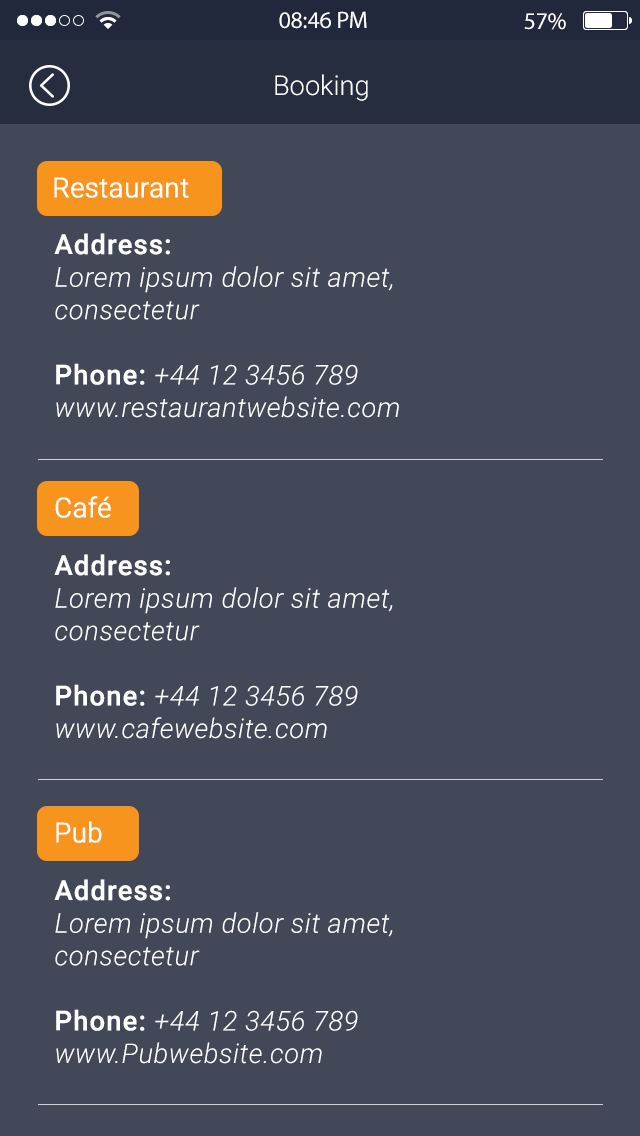
<style>
.page{position:relative;width:640px;height:1136px;background:#424858}
.page>*{position:absolute;margin:0}
.t1{font:24px "MyriadPro-Regular";color:#fefeff}
.t2{font:24px "MyriadPro-Regular";color:#ffffff}
.t3{font:27.2px "Roboto-Light";color:#ffffff}
.t4{font:27.2px "Roboto-Light";color:#ffffff;font-weight:bold}
.t5{font:27.2px "Roboto-LightItalic";letter-spacing:0.02em;color:#ffffff}
.t6{font:27.2px "Roboto-Medium";letter-spacing:0.02em;color:#ffffff;font-weight:bold}
</style>
<div class="page">
<p class="t1" style="left:279px;top:11px;width:88px;height:18px">08:46 PM</p>
<p class="t2" style="left:524px;top:13px;width:42px;height:17px">57%</p>
<p class="t3" style="left:275px;top:74px;width:93px;height:27px">Booking</p>
<p class="t4" style="left:54px;top:177px;width:135px;height:21px">Restaurant</p>
<p class="t5" style="left:54px;top:233px;width:345px;height:185px"><span class="t6">Address:<br></span>Lorem ipsum dolor sit amet,<br>consectetur<br><br><span class="t6">Phone: </span>+44 12 3456 789<br>www.restaurantwebsite.com</p>
<p class="t4" style="left:55px;top:496px;width:56px;height:22px">Café</p>
<p class="t5" style="left:54px;top:554px;width:339px;height:185px"><span class="t6">Address:<br></span>Lorem ipsum dolor sit amet,<br>consectetur<br><br><span class="t6">Phone: </span>+44 12 3456 789<br>www.cafewebsite.com</p>
<p class="t4" style="left:56px;top:821px;width:46px;height:22px">Pub</p>
<p class="t5" style="left:54px;top:879px;width:339px;height:185px"><span class="t6">Address:<br></span>Lorem ipsum dolor sit amet,<br>consectetur<br><br><span class="t6">Phone: </span>+44 12 3456 789<br>www.Pubwebsite.com</p>
</div>
